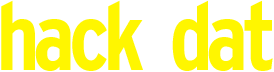
<style>
.page{position:relative;width:274px;height:72px;background:#ffffff}
.page>*{position:absolute;margin:0}
.t1{font:95px "InterstateCondensedBold";letter-spacing:-0.07em;color:#fff600}
</style>
<div class="page">
<p class="t1" style="left:1px;top:0px;width:272px;height:71px">hack  dat</p>
</div>
